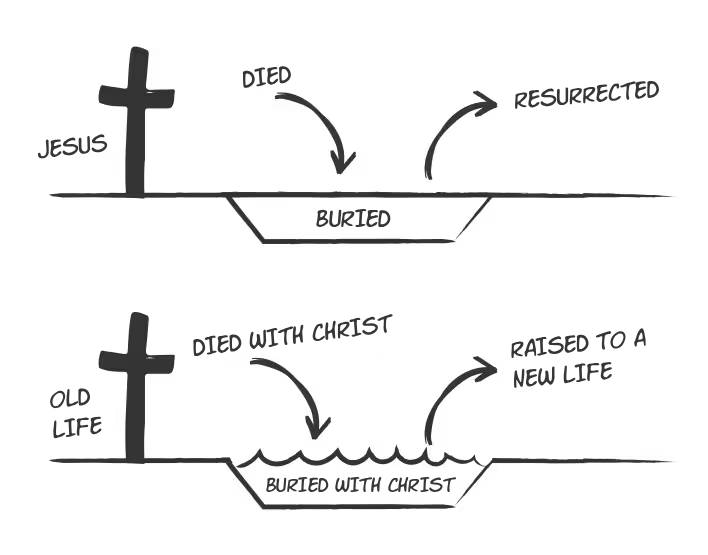
<style>
.page{position:relative;width:708px;height:555px;background:#ffffff}
.page>*{position:absolute;margin:0}
.t1{font:30px "VTCLettererPro";color:#363636}
.t2{font:30px/30px "VTCLettererPro";color:#363636}
.t3{font:25px "VTCLettererPro";color:#363636}
</style>
<div class="page">
<p class="t1" style="left:242px;top:66px;width:49px;height:22px;rotate:-7deg">DIED</p>
<p class="t1" style="left:515px;top:81px;width:144px;height:28px;rotate:-5deg">RESURRECTED</p>
<p class="t1" style="left:37px;top:134px;width:71px;height:25px;rotate:-6deg">JESUS</p>
<p class="t1" style="left:316px;top:208px;width:75px;height:19px">BURIED</p>
<p class="t1" style="left:193px;top:314px;width:200px;height:43px;rotate:-7deg">DIED WITH CHRIST</p>
<p class="t2" style="left:511px;top:328px;width:135px;height:60px;rotate:-5deg">RAISED TO A<br>NEW LIFE</p>
<p class="t2" style="left:50px;top:388px;width:52px;height:51px;rotate:-6deg">OLD<br>LIFE</p>
<p class="t3" style="left:266px;top:476px;width:191px;height:17px">BURIED WITH CHRIST</p>
</div>
